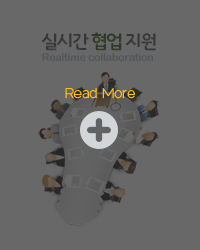
<style>
.page{position:relative;width:200px;height:250px;background:#686868}
.page>*{position:absolute;margin:0}
.t1{font:18.4px "InterGTB";letter-spacing:-0.1em;color:#363836}
.t2{font:10.7px "ArialRoundedMTBold";letter-spacing:-0.025em;color:#505659}
.t3{font:14px "Raleway-Thin";letter-spacing:-0.025em;color:#ffbd1e;font-weight:bold}
</style>
<div class="page">
<p class="t1" style="left:41px;top:32px;width:115px;height:19px">실시간 협업 지원</p>
<p class="t2" style="left:42px;top:53px;width:111px;height:8px">Realtime collaboration</p>
<p class="t3" style="left:65px;top:88px;width:70px;height:11px">Read More</p>
</div>
